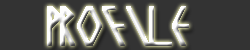
<style>
.page{position:relative;width:250px;height:50px;background:#333333}
.page>*{position:absolute;margin:0}
.t1{font:48px "exoziti";font-weight:bold}
</style>
<div class="page">
<p class="t1" style="left:47px;top:6px;width:142px;height:40px">PROFILE</p>
</div>
